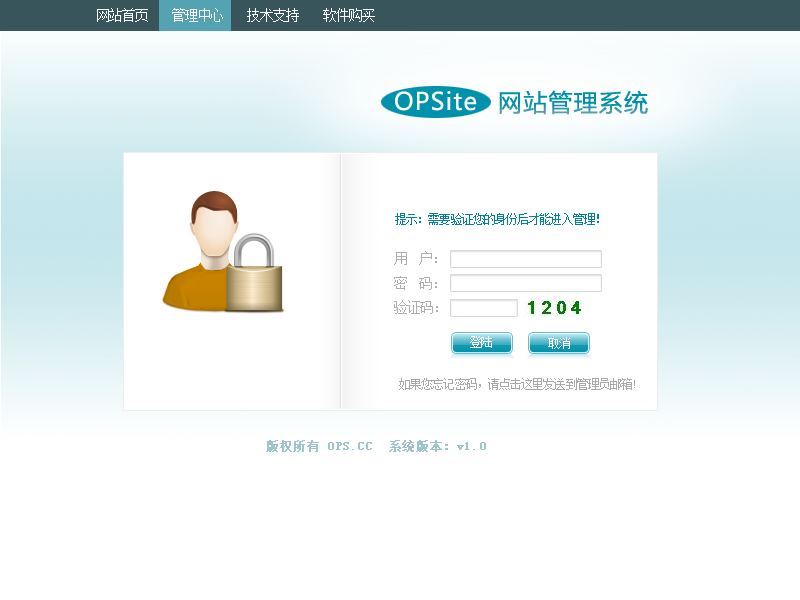
<style>
.page{position:relative;width:800px;height:600px;background:#ffffff}
.page>*{position:absolute;margin:0}
.t1{font:14px "SimSun";letter-spacing:-0.075em;color:#ffffff}
.t2{font:24px "MicrosoftYaHei";letter-spacing:0.05em;color:#ffffff}
.t3{font:24px "MicrosoftYaHei";letter-spacing:0.05em}
.t4{font:12px "SimSun";letter-spacing:-0.075em;color:#018299}
.t5{font:14px "SimSun";letter-spacing:-0.075em;color:#afafaf}
.t6{font:12px "SimSun";letter-spacing:-0.075em;color:#ffffff}
.t7{font:12px "SimSun";letter-spacing:-0.075em;color:#aaa9a9}
.t8{font:12px "SimSun";letter-spacing:0.05em;color:#9ec5cc;font-weight:bold}
</style>
<div class="page">
<p class="t1" style="left:97px;top:8px;width:278px;height:14px">网站首页    管理中心    技术支持    软件购买</p>
<p class="t2" style="left:395px;top:91px;width:82px;height:20px">OPSite</p>
<p class="t3" style="left:499px;top:90px;width:149px;height:25px">网站管理系统</p>
<p class="t4" style="left:395px;top:213px;width:204px;height:12px">提示：需要验证您的身份后才能进入管理！</p>
<p class="t5" style="left:394px;top:251px;width:44px;height:63px">用  户：<br>密  码：<br>验证码：</p>
<p class="t6" style="left:470px;top:336px;width:22px;height:12px">登陆</p>
<p class="t6" style="left:548px;top:337px;width:22px;height:12px">取消</p>
<p class="t7" style="left:399px;top:378px;width:236px;height:12px">如果您忘记密码，请点击这里发送到管理员邮箱!</p>
<p class="t8" style="left:266px;top:440px;width:220px;height:12px">版权所有 OPS.CC  系统版本：v1.0</p>
</div>
